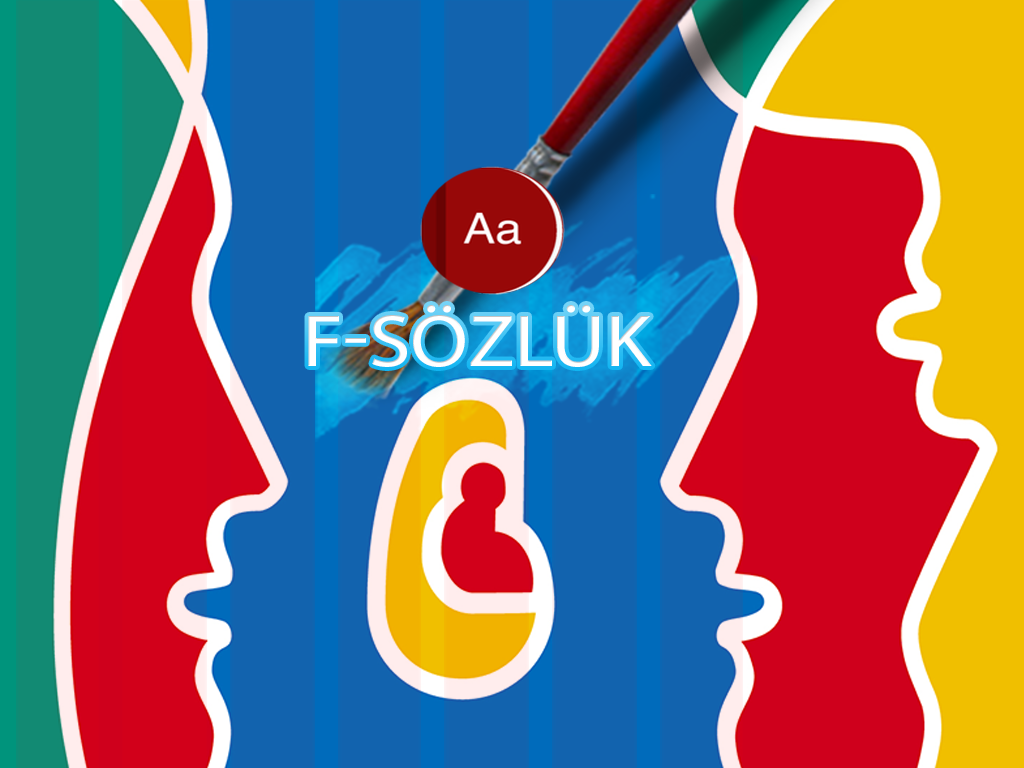
<style>
.page{position:relative;width:1024px;height:768px;background:#1263ae}
.page>*{position:absolute;margin:0}
.t1{font:74.1px "MyriadPro-Regular";color:#f2f6fc;text-transform:uppercase;scale:1.13 1}
</style>
<div class="page">
<p class="t1" style="left:308px;top:305px;width:344px;height:62px">F-Sözlük</p>
</div>
